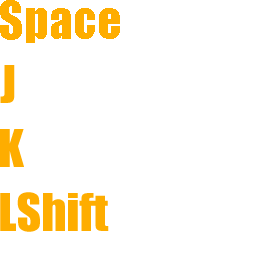
<style>
.page{position:relative;width:256px;height:256px;background:#ffffff}
.page>*{position:absolute;margin:0}
.t1{font:48px "Impact";color:#fead00}
</style>
<div class="page">
<p class="t1" style="left:0px;top:0px;width:120px;height:43px">Space</p>
<p class="t1" style="left:0px;top:65px;width:15px;height:38px">J</p>
<p class="t1" style="left:0px;top:129px;width:24px;height:38px">K</p>
<p class="t1" style="left:0px;top:192px;width:109px;height:40px">LShift</p>
</div>
